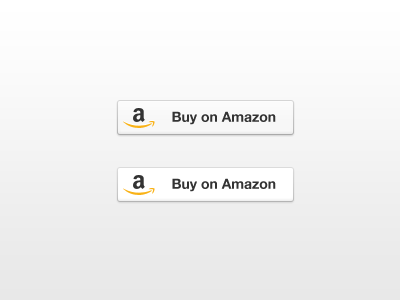
<style>
.page{position:relative;width:400px;height:300px}
.page>*{position:absolute;margin:0}
.t1{font:14px "HelveticaNeue-Bold";color:#333333}
</style>
<div class="page">
<p class="t1" style="left:172px;top:111px;width:104px;height:14px">Buy on Amazon</p>
<p class="t1" style="left:172px;top:178px;width:104px;height:14px">Buy on Amazon</p>
</div>
